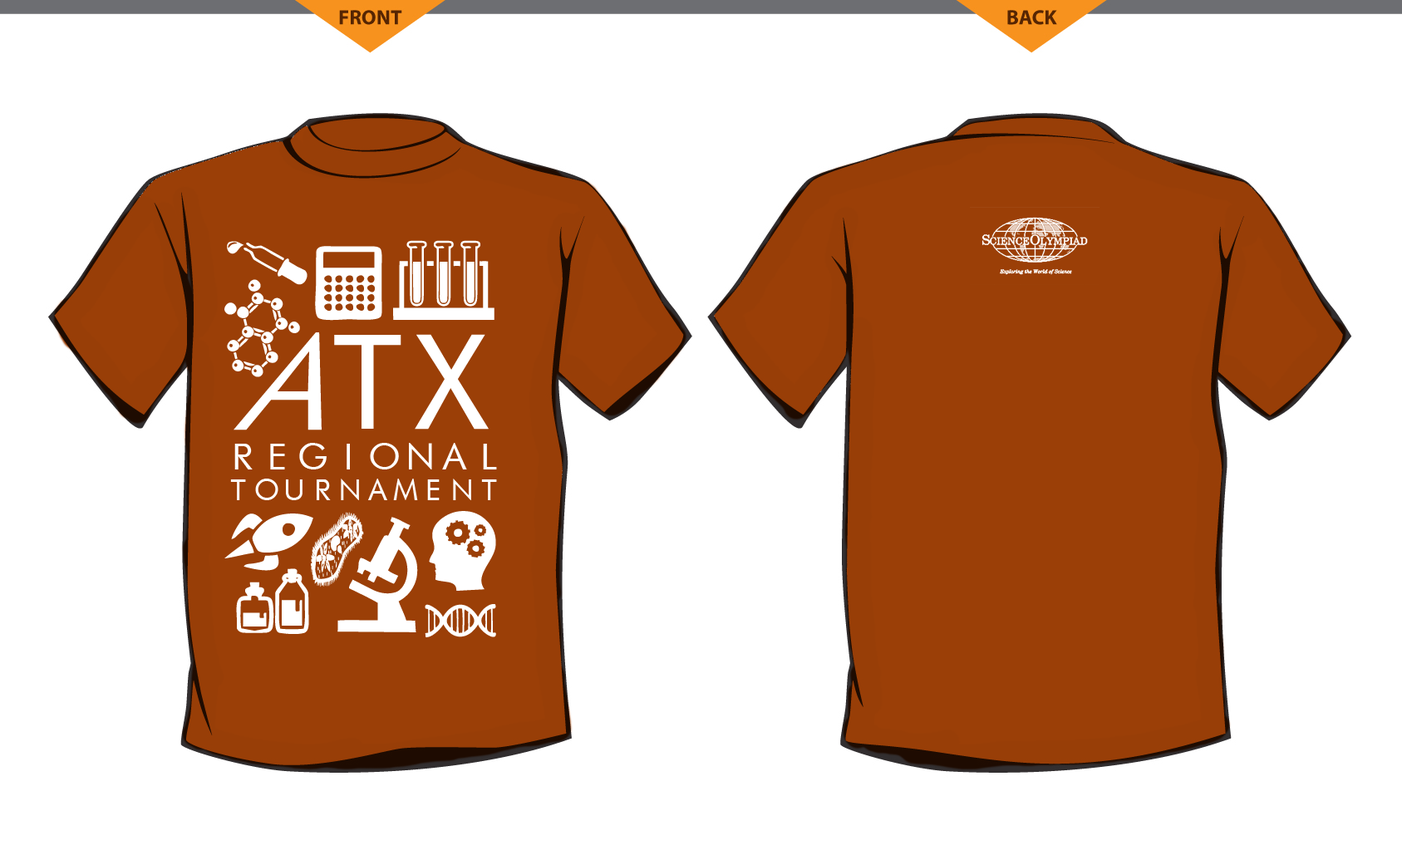
<style>
.page{position:relative;width:1402px;height:850px;background:#ffffff}
.page>*{position:absolute;margin:0}
.t1{font:139.6px "FuturistFixedWidth-Regular";letter-spacing:-0.35em;color:#ffffff;scale:0.91 1}
.t2{font:127.8px "FuturistFixedWidth-Regular";letter-spacing:-0.35em;color:#ffffff}
.t3{font:35.5px "FuturistFixedWidth-Regular";color:#ffffff}
.t4{font:27.9px "FuturistFixedWidth-Regular";color:#ffffff}
</style>
<div class="page">
<p class="t1" style="left:234px;top:332px;width:88px;height:99px">A</p>
<p class="t2" style="left:334px;top:334px;width:155px;height:96px">TX</p>
<p class="t3" style="left:234px;top:443px;width:263px;height:27px">REGIONAL</p>
<p class="t4" style="left:230px;top:479px;width:267px;height:21px">TOURNAMENT</p>
</div>
